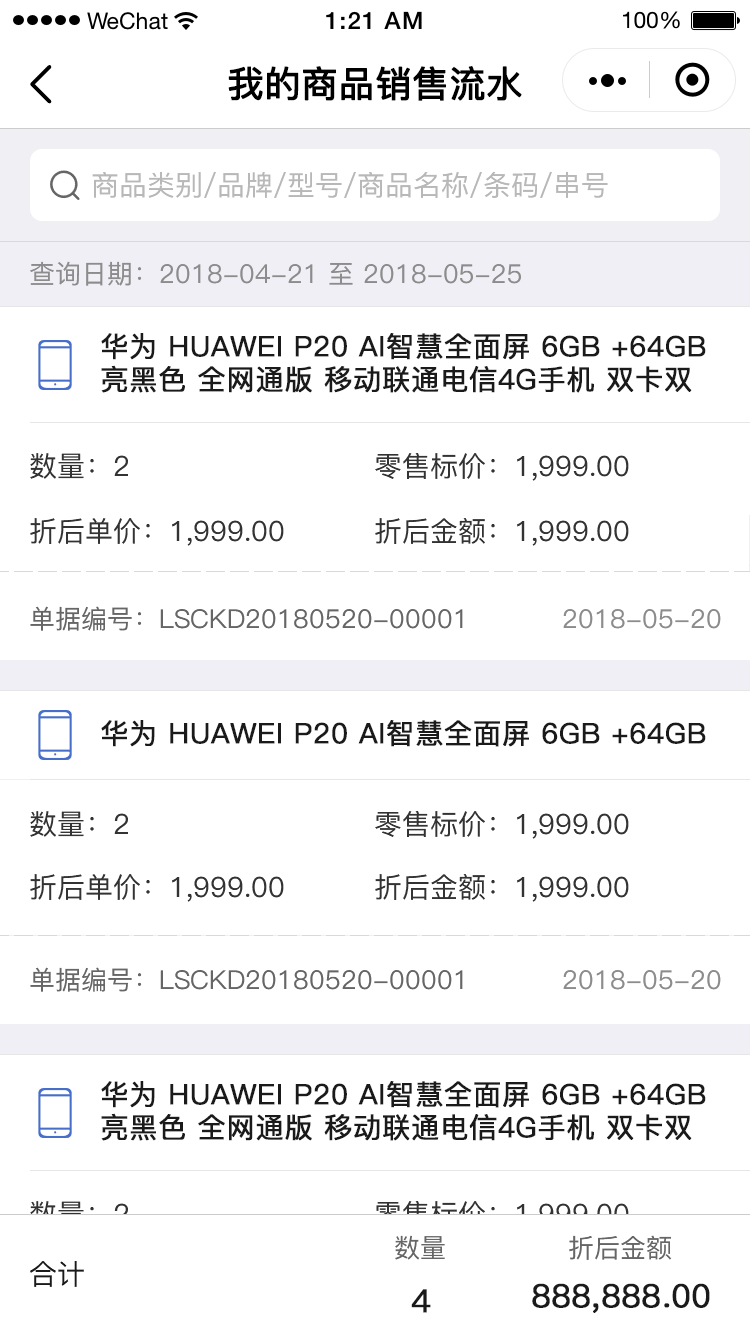
<style>
.page{position:relative;width:750px;height:1334px;background:#ffffff}
.page>*{position:absolute;margin:0}
.t1{font:36px "PingFang-SC-Medium";color:#000000;font-weight:bold}
.t2{font:28px "PingFang-SC-Medium";color:#b8b8b8}
.t3{font:26px "PingFang-SC-Medium";color:#8c8c8c}
.t4{font:28px "PingFang-SC-Medium";color:#1a1a1a;font-weight:bold}
.t5{font:28px "PingFang-SC-Medium";color:#333333}
.t6{font:26px "PingFang-SC-Medium";color:#666666}
.t7{font:28px "PingFang-SC-Medium"}
.t8{font:28px "PingFang-SC-Medium";color:#1a1a1a}
.t9{font:32px "PingFang-SC-Medium";color:#1a1a1a;font-weight:bold}
</style>
<div class="page">
<p class="t1" style="left:228px;top:66px;width:294px;height:35px">我的商品销售流水</p>
<p class="t2" style="left:92px;top:171px;width:516px;height:27px">商品类别/品牌/型号/商品名称/条码/串号</p>
<p class="t3" style="left:30px;top:261px;width:491px;height:25px">查询日期：2018-04-21 至 2018-05-25</p>
<p class="t4" style="left:101px;top:333px;width:605px;height:60px">华为 HUAWEI P20 AI智慧全面屏 6GB +64GB 亮黑色 全网通版 移动联通电信4G手机 双卡双待</p>
<p class="t5" style="left:30px;top:453px;width:98px;height:26px">数量：2</p>
<p class="t5" style="left:375px;top:453px;width:254px;height:28px">零售标价：1,999.00</p>
<p class="t5" style="left:30px;top:518px;width:254px;height:28px">折后单价：1,999.00</p>
<p class="t5" style="left:375px;top:518px;width:254px;height:28px">折后金额：1,999.00</p>
<p class="t6" style="left:30px;top:606px;width:433px;height:25px">单据编号：LSCKD20180520-00001</p>
<p class="t3" style="left:563px;top:609px;width:158px;height:20px">2018-05-20</p>
<p class="t4" style="left:101px;top:720px;width:605px;height:27px">华为 HUAWEI P20 AI智慧全面屏 6GB +64GB</p>
<p class="t5" style="left:30px;top:811px;width:98px;height:26px">数量：2</p>
<p class="t5" style="left:375px;top:811px;width:254px;height:28px">零售标价：1,999.00</p>
<p class="t5" style="left:30px;top:874px;width:254px;height:28px">折后单价：1,999.00</p>
<p class="t5" style="left:375px;top:874px;width:254px;height:28px">折后金额：1,999.00</p>
<p class="t6" style="left:30px;top:967px;width:433px;height:25px">单据编号：LSCKD20180520-00001</p>
<p class="t3" style="left:563px;top:970px;width:158px;height:20px">2018-05-20</p>
<p class="t4" style="left:101px;top:1081px;width:605px;height:60px">华为 HUAWEI P20 AI智慧全面屏 6GB +64GB 亮黑色 全网通版 移动联通电信4G手机 双卡双待</p>
<p class="t7" style="left:30px;top:1201px;width:98px;height:26px">数量：2</p>
<p class="t7" style="left:375px;top:1201px;width:254px;height:28px">零售标价：1,999.00</p>
<p class="t6" style="left:395px;top:1235px;width:50px;height:25px">数量</p>
<p class="t6" style="left:569px;top:1235px;width:103px;height:25px">折后金额</p>
<p class="t8" style="left:30px;top:1261px;width:54px;height:26px">合计</p>
<p class="t9" style="left:411px;top:1289px;width:20px;height:24px">4</p>
<p class="t9" style="left:532px;top:1283px;width:178px;height:30px">888,888.00</p>
</div>
